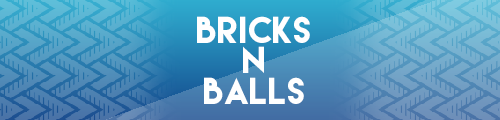
<style>
.page{position:relative;width:500px;height:120px}
.page>*{position:absolute;margin:0}
.t1{font:33.3px/30.6px "LemonMilk";letter-spacing:0.02em;color:#ffffff}
</style>
<div class="page">
<p class="t1" style="left:197px;top:16px;width:113px;height:88px;text-align:center">bricks<br>n<br>balls</p>
</div>
